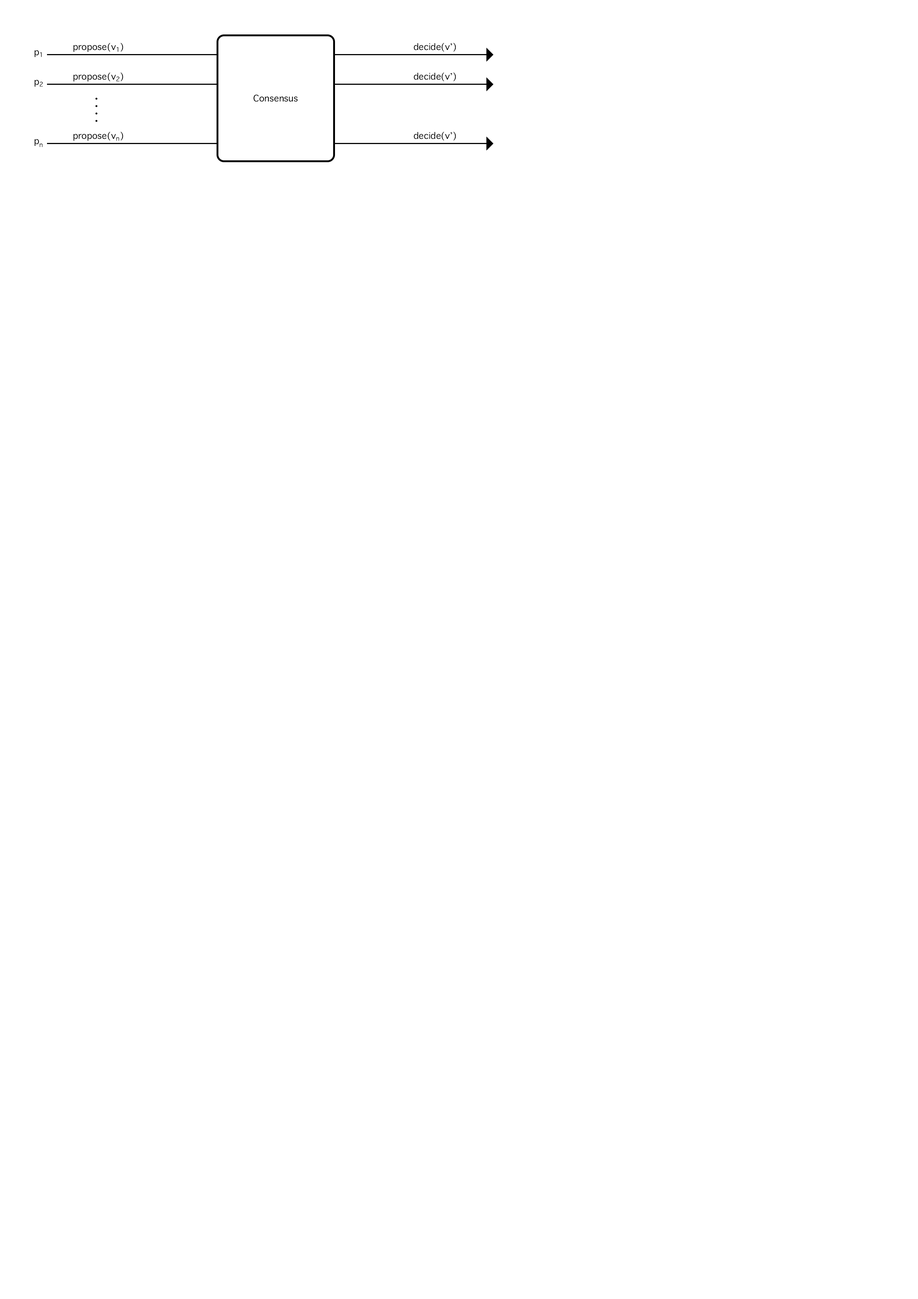
<style>
.page{position:relative;width:918px;height:1299px;background:#ffffff}
.page>*{position:absolute;margin:0}
.t1{font:12.3px "AppleSymbols";color:#000000}
</style>
<div class="page">
<p class="t1" style="left:34px;top:50px;width:8px;height:7px">p₁</p>
<p class="t1" style="left:73px;top:43px;width:50px;height:9px">propose(v₁)</p>
<p class="t1" style="left:414px;top:43px;width:42px;height:9px">decide(v’)</p>
<p class="t1" style="left:73px;top:73px;width:50px;height:8px">propose(v₂)</p>
<p class="t1" style="left:414px;top:73px;width:42px;height:8px">decide(v’)</p>
<p class="t1" style="left:34px;top:80px;width:9px;height:7px">p₂</p>
<p class="t1" style="left:254px;top:94px;width:44px;height:8px">Consensus</p>
<p class="t1" style="left:73px;top:132px;width:50px;height:9px">propose(v )</p>
<p class="t1" style="left:116px;top:137px;width:3px;height:4px">ⁿ</p>
<p class="t1" style="left:414px;top:132px;width:42px;height:9px">decide(v’)</p>
<p class="t1" style="left:34px;top:139px;width:5px;height:7px">p</p>
<p class="t1" style="left:40px;top:143px;width:3px;height:4px">ⁿ</p>
</div>
